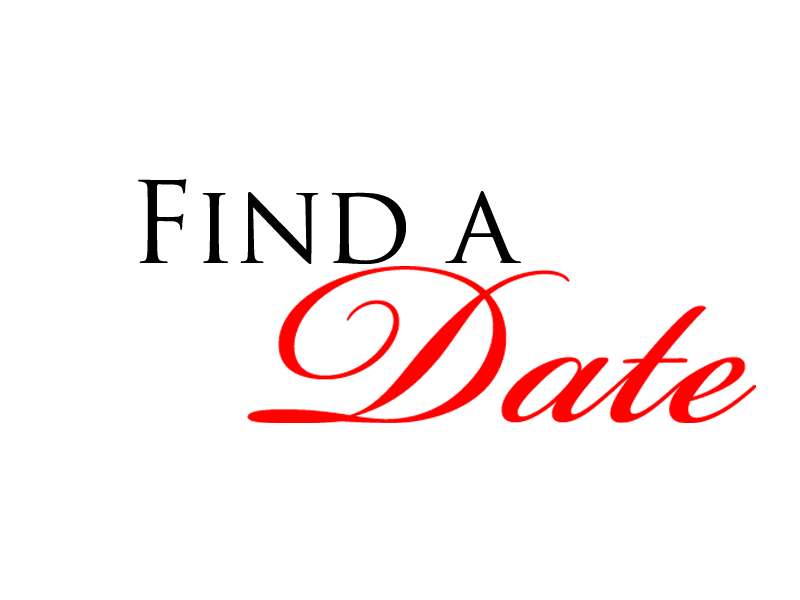
<style>
.page{position:relative;width:800px;height:600px;background:#ffffff}
.page>*{position:absolute;margin:0}
.t1{font:110px "TrajanPro-Regular";color:#010101}
</style>
<div class="page">
<p class="t1" style="left:138px;top:179px;width:383px;height:85px">Find a</p>
</div>
